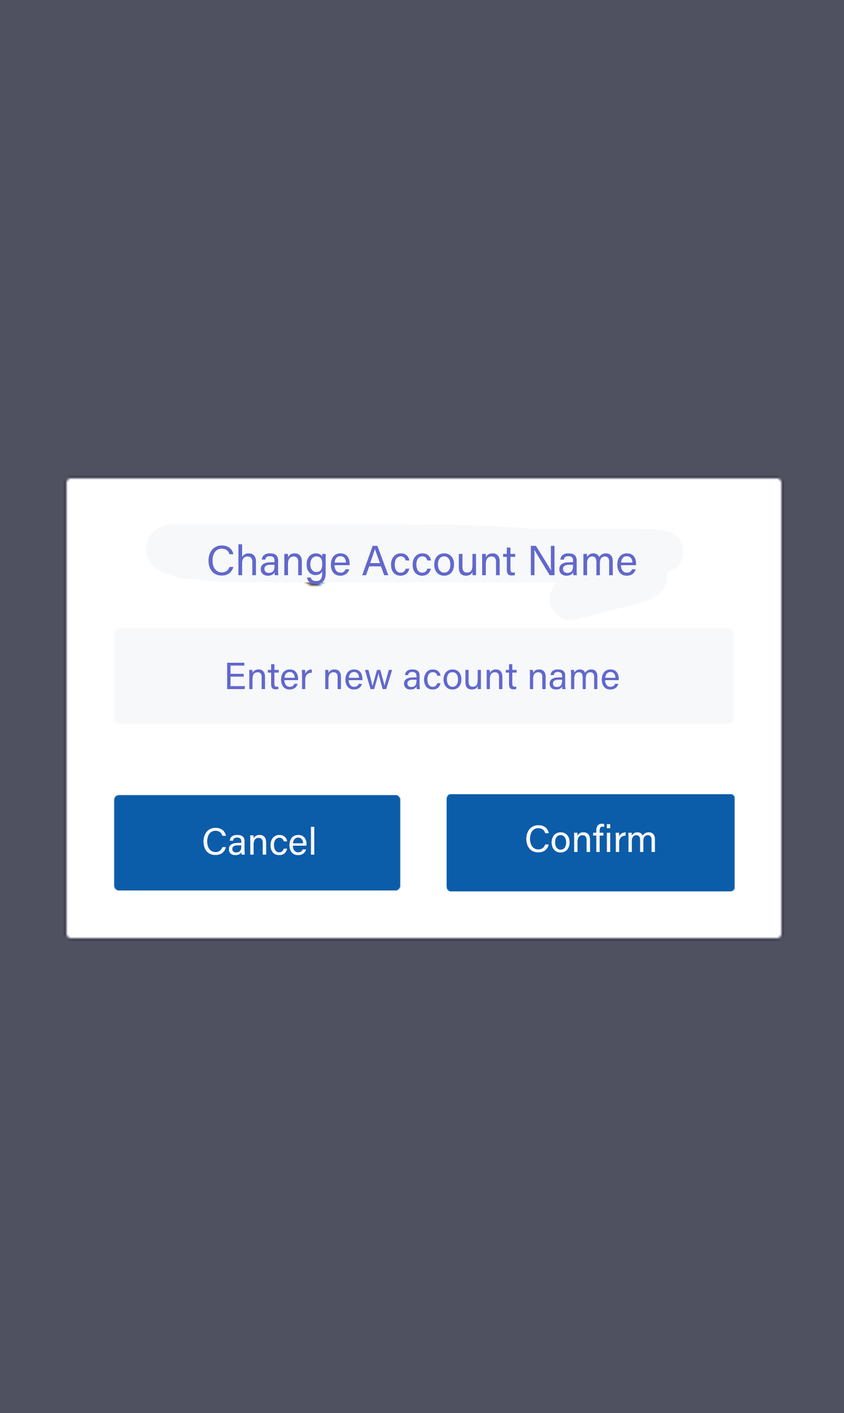
<style>
.page{position:relative;width:844px;height:1413px;background:#505160}
.page>*{position:absolute;margin:0}
.t1{font:42.2px "AcuminConcept-Regular";color:#6168cb;font-style:italic}
.t2{font:38px "AcuminConcept-Regular";color:#6168cb;font-style:italic}
.t3{font:38px "AcuminConcept-Regular";color:#f7f8fa;font-style:italic}
</style>
<div class="page">
<p class="t1" style="left:208px;top:544px;width:428px;height:40px">Change Account Name</p>
<p class="t2" style="left:227px;top:663px;width:392px;height:27px">Enter new acount name</p>
<p class="t3" style="left:203px;top:827px;width:111px;height:28px">Cancel</p>
<p class="t3" style="left:526px;top:824px;width:129px;height:29px">Confirm</p>
</div>
